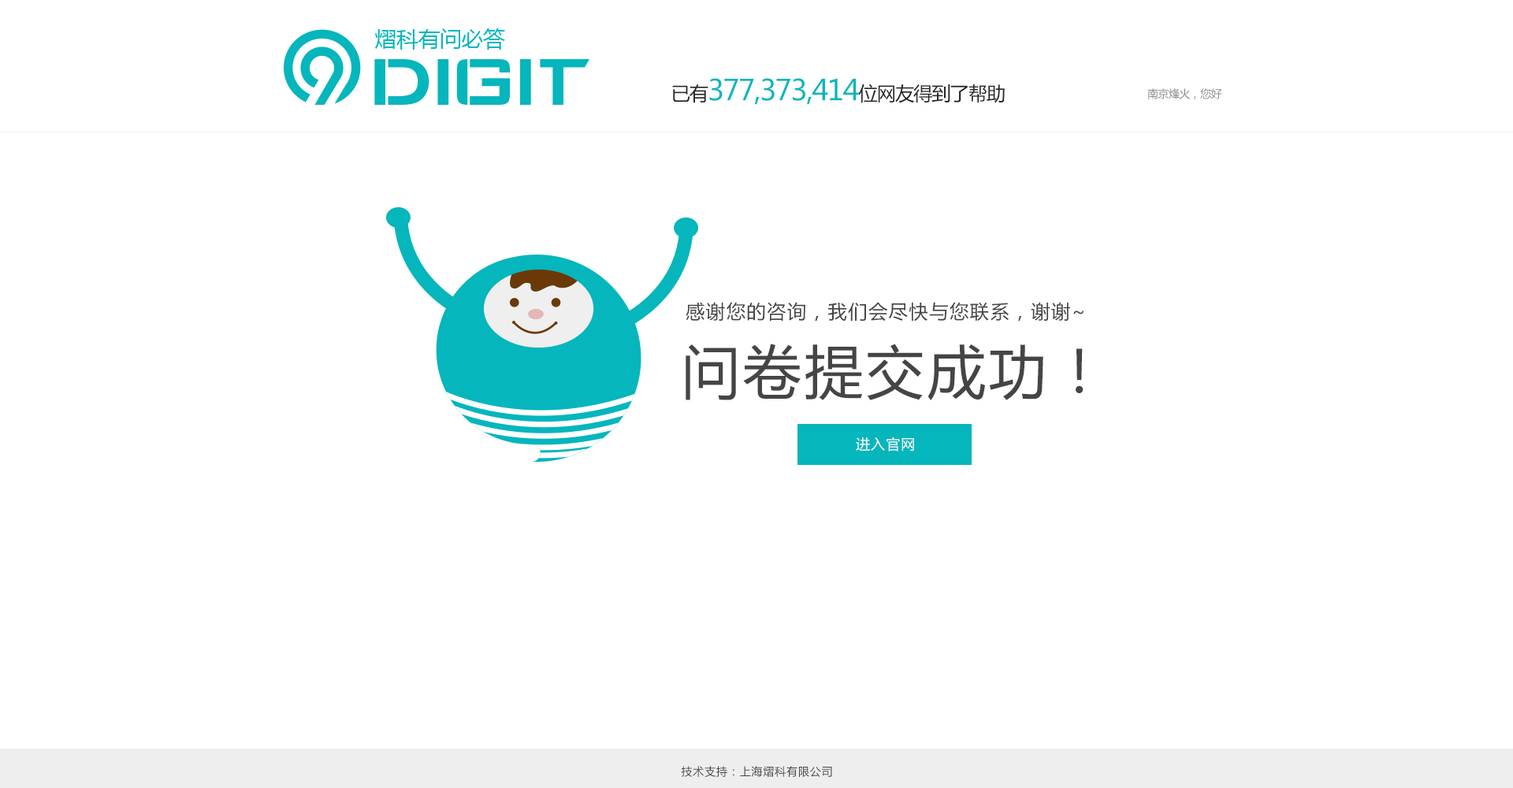
<style>
.page{position:relative;width:1513px;height:788px;background:#ffffff}
.page>*{position:absolute;margin:0}
.t1{font:28.4px "MicrosoftYaHei";letter-spacing:-0.04em;color:#05b6bc}
.t2{font:19.1px "MicrosoftYaHei";letter-spacing:-0.04em;color:#272727}
.t3{font:11px "MicrosoftYaHei";letter-spacing:-0.04em;color:#898989}
.t4{font:19.2px "MicrosoftYaHei";letter-spacing:0.06em;color:#454545}
.t5{font:57.9px "MicrosoftYaHei";letter-spacing:0.06em;color:#454545}
.t6{font:14.2px "MicrosoftYaHei";letter-spacing:0.06em;color:#ffffff}
.t7{font:11px "MicrosoftYaHei";letter-spacing:0.06em;color:#454545}
</style>
<div class="page">
<p class="t1" style="left:672px;top:78px;width:333px;height:27px"><span class="t2">已有</span>377,373,414<span class="t2">位网友得到了帮助</span></p>
<p class="t3" style="left:1147px;top:88px;width:75px;height:11px">南京烽火，您好</p>
<p class="t4" style="left:686px;top:302px;width:398px;height:20px">感谢您的咨询，我们会尽快与您联系，谢谢~</p>
<p class="t5" style="left:686px;top:344px;width:398px;height:56px">问卷提交成功！</p>
<p class="t6" style="left:856px;top:437px;width:58px;height:15px">进入官网</p>
<p class="t7" style="left:681px;top:766px;width:151px;height:11px">技术支持：上海熠科有限公司</p>
</div>
